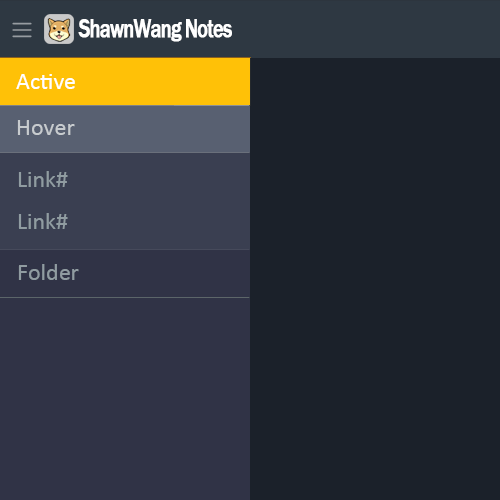
<style>
.page{position:relative;width:500px;height:500px;background:#1b212a}
.page>*{position:absolute;margin:0}
.t1{font:26.4px "FranklinGothic-Medium";letter-spacing:-0.06em;color:#ffffff;font-weight:bold;scale:0.76 1}
.t2{font:24px "Calibri";color:#ffffff}
.t3{font:24px "Calibri";color:#c7cbce}
.t4{font:24px "Calibri";color:#909ca1}
</style>
<div class="page">
<p class="t1" style="left:78px;top:19px;width:154px;height:23px">ShawnWang Notes</p>
<p class="t2" style="left:16px;top:74px;width:59px;height:15px">Active</p>
<p class="t3" style="left:17px;top:120px;width:58px;height:15px">Hover</p>
<p class="t4" style="left:18px;top:171px;width:50px;height:16px">Link#</p>
<p class="t4" style="left:18px;top:213px;width:50px;height:16px">Link#</p>
<p class="t4" style="left:18px;top:264px;width:61px;height:16px">Folder</p>
</div>
